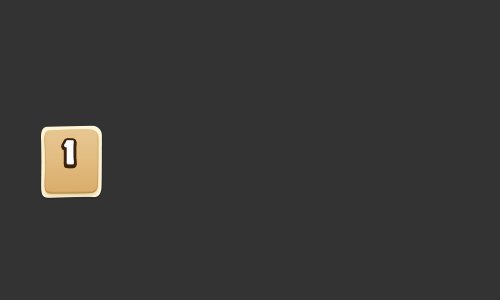
<style>
.page{position:relative;width:500px;height:300px;background:#333333}
.page>*{position:absolute;margin:0}
.t1{font:33px "Skranji-Bold";letter-spacing:0.02em;color:#ffffff;scale:0.96 1}
</style>
<div class="page">
<p class="t1" style="left:64px;top:140px;width:10px;height:25px">1</p>
</div>
